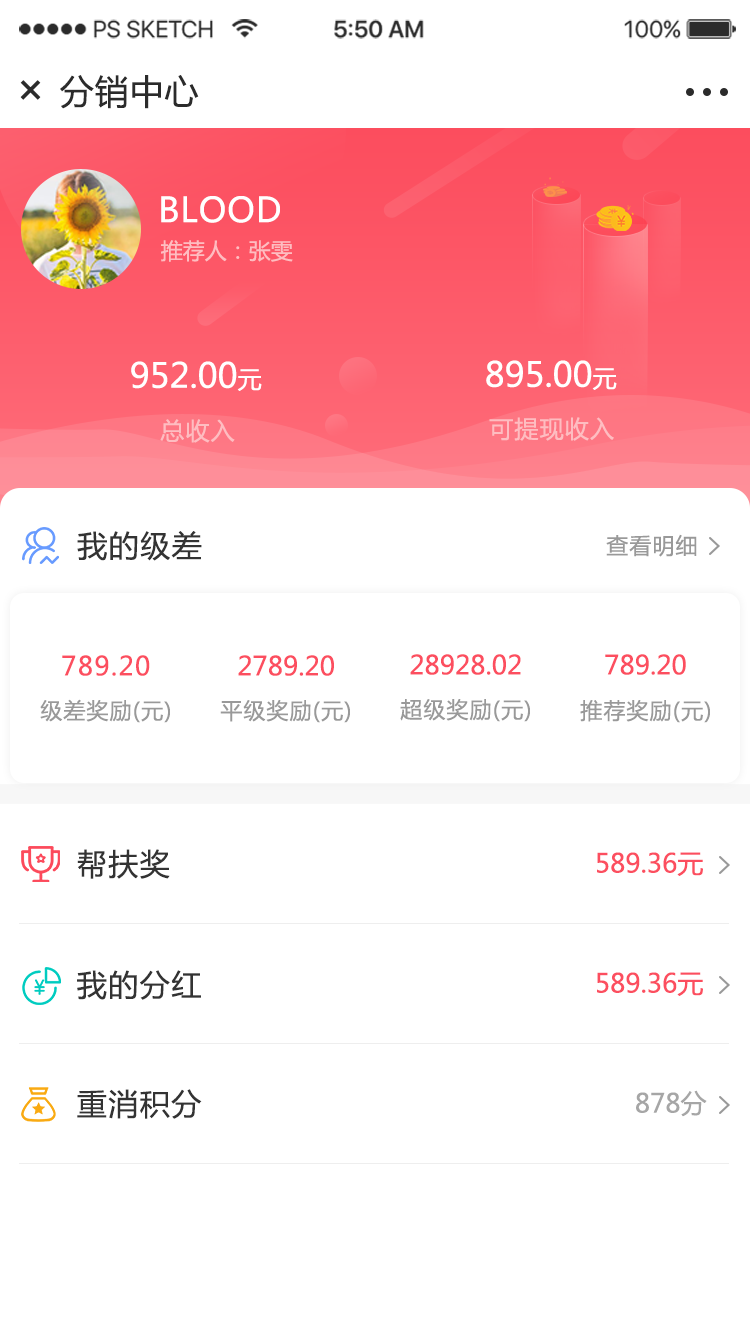
<style>
.page{position:relative;width:750px;height:1334px;background:#ffffff}
.page>*{position:absolute;margin:0}
.t1{font:34px "MicrosoftYaHei";letter-spacing:0.025em;color:#2b2b2b;text-transform:uppercase}
.t2{font:47.9px "MicrosoftYaHei";letter-spacing:0.025em;color:#2b2b2b;text-transform:uppercase}
.t3{font:34px "MicrosoftYaHei";letter-spacing:0.025em;color:#ffffff}
.t4{font:22px "MicrosoftYaHei";color:#febdc1}
.t5{font:34px "MicrosoftYaHei";color:#ffffff}
.t6{font:24px "MicrosoftYaHei";color:#ffffff}
.t7{font:24px "MicrosoftYaHei";letter-spacing:0.05em;color:#febdc1}
.t8{font:30px "MicrosoftYaHei";letter-spacing:0.05em;color:#333333}
.t9{font:22px "MicrosoftYaHei";letter-spacing:0.05em;color:#999999}
.t10{font:26px "MicrosoftYaHei";color:#fc4e5f}
.t11{font:26px "MicrosoftYaHei";letter-spacing:0.05em;color:#fc4e5f}
.t12{font:26px "MicrosoftYaHei";color:#a6a6a6}
</style>
<div class="page">
<p class="t1" style="left:60px;top:75px;width:139px;height:34px">分销中心</p>
<p class="t2" style="left:20px;top:80px;width:21px;height:20px;rotate:45deg">+</p>
<p class="t3" style="left:161px;top:196px;width:119px;height:27px">BLOOD</p>
<p class="t4" style="left:161px;top:240px;width:132px;height:22px">推荐人：张雯</p>
<p class="t5" style="left:131px;top:361px;width:131px;height:30px">952.00<span class="t6">元</span></p>
<p class="t5" style="left:486px;top:360px;width:131px;height:30px">895.00<span class="t6">元</span></p>
<p class="t7" style="left:160px;top:419px;width:75px;height:24px">总收入</p>
<p class="t7" style="left:489px;top:417px;width:125px;height:24px">可提现收入</p>
<p class="t8" style="left:77px;top:531px;width:125px;height:30px">我的级差</p>
<p class="t9" style="left:606px;top:534px;width:91px;height:23px">查看明细</p>
<p class="t10" style="left:410px;top:654px;width:111px;height:21px">28928.02</p>
<p class="t10" style="left:605px;top:654px;width:81px;height:21px">789.20</p>
<p class="t11" style="left:62px;top:655px;width:88px;height:21px">789.20</p>
<p class="t10" style="left:238px;top:655px;width:96px;height:21px">2789.20</p>
<p class="t9" style="left:40px;top:699px;width:130px;height:24px">级差奖励(元)</p>
<p class="t9" style="left:220px;top:700px;width:130px;height:23px">平级奖励(元)</p>
<p class="t9" style="left:400px;top:699px;width:130px;height:23px">超级奖励(元)</p>
<p class="t9" style="left:580px;top:700px;width:130px;height:23px">推荐奖励(元)</p>
<p class="t8" style="left:77px;top:849px;width:93px;height:30px">帮扶奖</p>
<p class="t10" style="left:597px;top:852px;width:106px;height:24px">589.36元</p>
<p class="t8" style="left:77px;top:970px;width:124px;height:30px">我的分红</p>
<p class="t10" style="left:597px;top:972px;width:106px;height:24px">589.36元</p>
<p class="t8" style="left:77px;top:1089px;width:125px;height:30px">重消积分</p>
<p class="t12" style="left:636px;top:1090px;width:71px;height:27px">878分</p>
</div>
